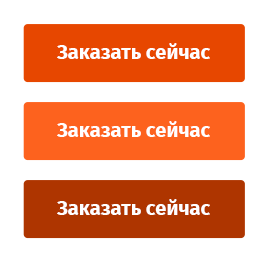
<style>
.page{position:relative;width:264px;height:275px;background:#ffffff}
.page>*{position:absolute;margin:0}
.t1{font:20px "FiraSans-Bold";color:#ffffff}
</style>
<div class="page">
<p class="t1" style="left:57px;top:43px;width:153px;height:16px">Заказать сейчас</p>
<p class="t1" style="left:57px;top:121px;width:153px;height:16px">Заказать сейчас</p>
<p class="t1" style="left:57px;top:199px;width:153px;height:16px">Заказать сейчас</p>
</div>
